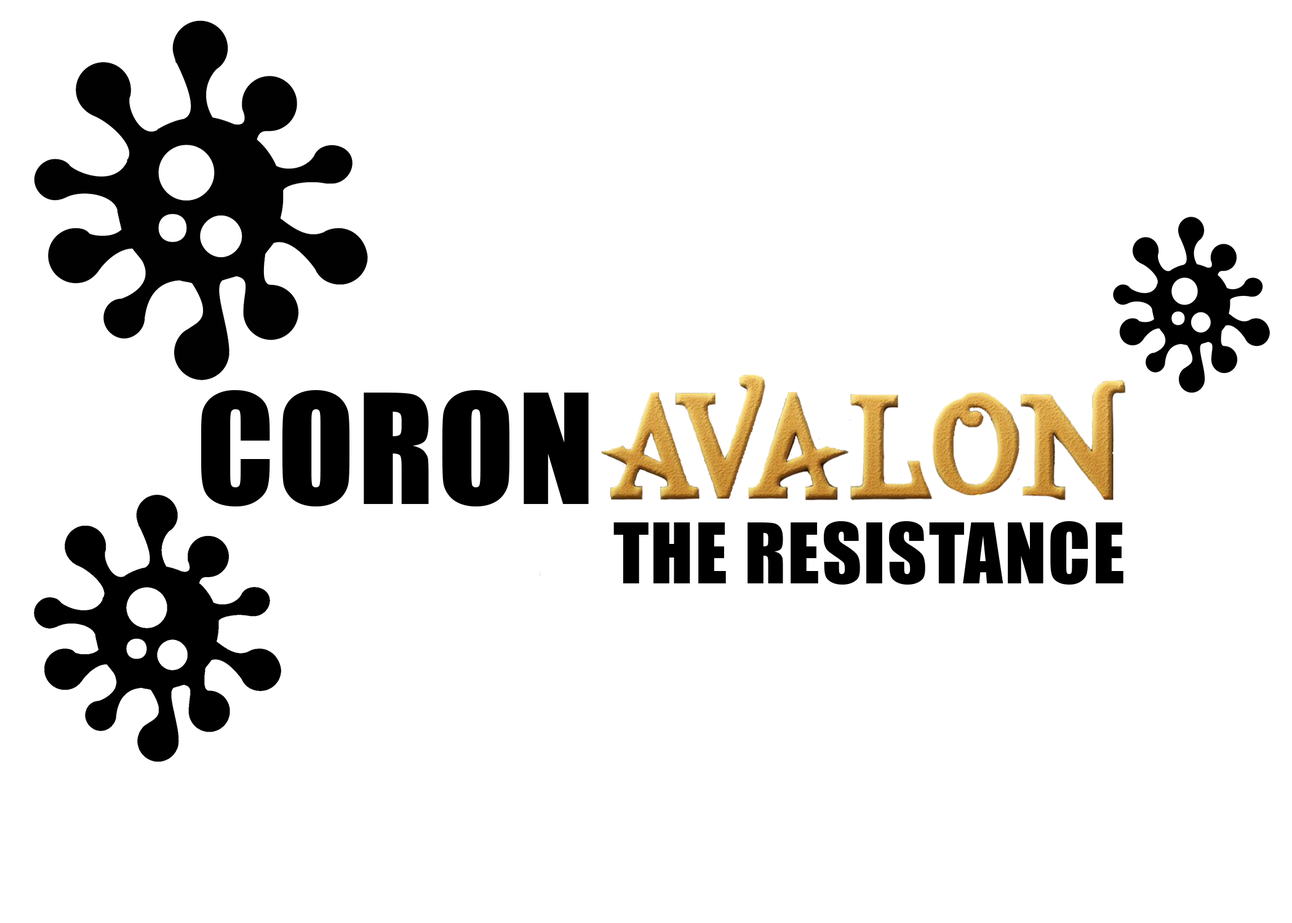
<style>
.page{position:relative;width:1292px;height:923px;background:#ffffff}
.page>*{position:absolute;margin:0}
.t1{font:141px "Impact";letter-spacing:0.025em;color:#000000}
.t2{font:76.9px "Impact";letter-spacing:0.025em;color:#000000}
</style>
<div class="page">
<p class="t1" style="left:201px;top:390px;width:388px;height:116px">CORON</p>
<p class="t2" style="left:613px;top:521px;width:510px;height:64px">THE RESISTANCE</p>
</div>
